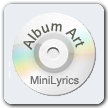
<style>
.page{position:relative;width:108px;height:108px;background:#eaedf1}
.page>*{position:absolute;margin:0}
.t1{font:14px "MicrosoftSansSerif";color:#5e5e54}
.t2{font:11px "MicrosoftSansSerif";color:#757575}
</style>
<div class="page">
<p class="t1" style="left:23px;top:23px;width:62px;height:27px">Album Art</p>
<p class="t2" style="left:30px;top:76px;width:49px;height:11px">MiniLyrics</p>
</div>
